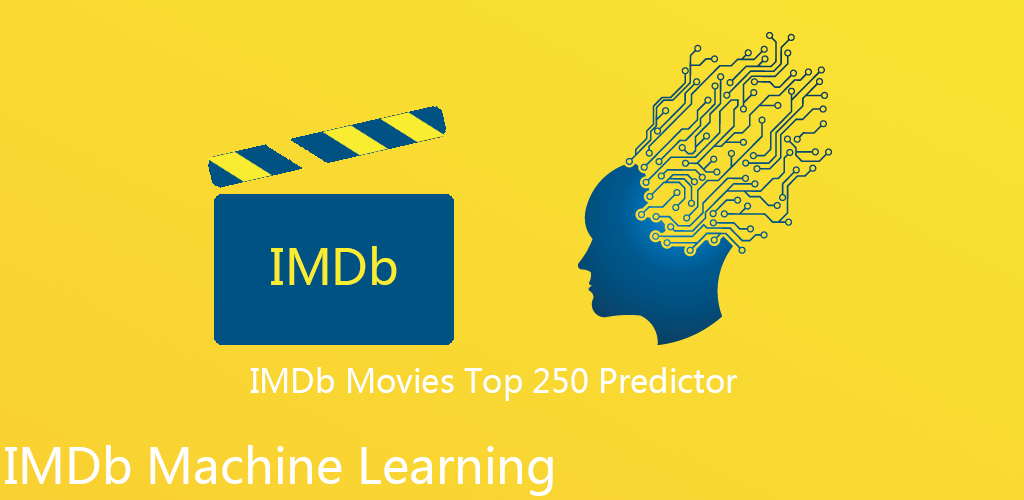
<style>
.page{position:relative;width:1024px;height:500px}
.page>*{position:absolute;margin:0}
.t1{font:48px "MicrosoftYaHei";color:#f9ed32}
.t2{font:32px "MicrosoftYaHei";color:#ffffff}
.t3{font:48px "MicrosoftYaHei";color:#ffffff}
</style>
<div class="page">
<p class="t1" style="left:271px;top:246px;width:126px;height:39px">IMDb</p>
<p class="t2" style="left:250px;top:367px;width:487px;height:34px">IMDb Movies Top 250 Predictor</p>
<p class="t3" style="left:5px;top:445px;width:548px;height:51px">IMDb Machine Learning</p>
</div>
